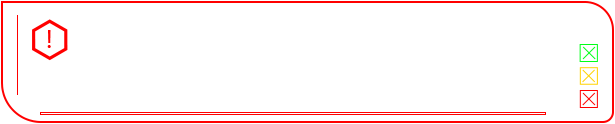
<style>
.page{position:relative;width:615px;height:124px;background:#ffffff}
.page>*{position:absolute;margin:0}
.t1{font:24px "MicrosoftYaHei";color:#ff0000}
</style>
<div class="page">
<p class="t1" style="left:47px;top:30px;width:4px;height:18px">!</p>
</div>
